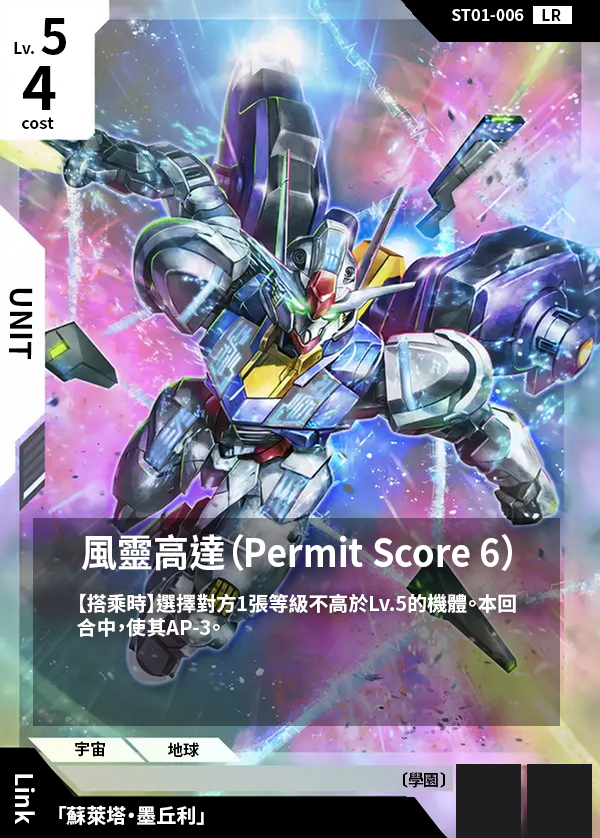
<style>
.page{position:relative;width:600px;height:838px}
.page>*{position:absolute;margin:0}
.t1{font:16px "NotoSansCJKtc-Bold";color:#ffffff}
.t2{font:16px "NotoSansCJKtc-Bold";color:#000000}
.t3{font:48px "NotoSansCJKtc-Bold";color:#000000}
.t4{font:60px "NotoSansCJKtc-Bold";color:#000000}
.t5{font:30px "NotoSansCJKtc-Bold";color:#000000}
.t6{font:38.4px "NotoSansCJKtc-Bold";color:#ffffff;scale:0.94 1}
.t7{font:20px "NotoSansCJKtc-Bold";color:#ffffff}
.t8{font:24px "NotoSansCJKtc-Bold";color:#ffffff}
</style>
<div class="page">
<p class="t1" style="left:452px;top:9px;width:72px;height:12px">ST01-006</p>
<p class="t2" style="left:542px;top:9px;width:19px;height:12px">LR</p>
<p class="t3" style="left:41px;top:18px;width:25px;height:37px">5</p>
<p class="t2" style="left:14px;top:42px;width:20px;height:12px">Lv.</p>
<p class="t4" style="left:23px;top:66px;width:33px;height:44px">4</p>
<p class="t2" style="left:22px;top:117px;width:32px;height:12px">cost</p>
<p class="t5" style="left:9px;top:288px;width:24px;height:71px;rotate:90deg">UNIT</p>
<p class="t6" style="left:81px;top:534px;width:431px;height:37px">風靈高達（Permit Score 6）</p>
<p class="t7" style="left:77px;top:593px;width:439px;height:44px">【搭乘時】選擇對方1張等級不高於Lv.5的機體。本回<br>合中，使其AP-3。</p>
<p class="t2" style="left:75px;top:741px;width:30px;height:16px">宇宙</p>
<p class="t2" style="left:168px;top:742px;width:31px;height:15px">地球</p>
<p class="t8" style="left:15px;top:774px;width:20px;height:50px;rotate:90deg">Link</p>
<p class="t2" style="left:403px;top:772px;width:42px;height:16px">〔學園〕</p>
<p class="t7" style="left:59px;top:805px;width:145px;height:21px">「蘇萊塔・墨丘利」</p>
</div>
